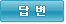
<style>
.page{position:relative;width:66px;height:24px}
.page>*{position:absolute;margin:0}
.t1{font:12px "morris9";color:#ffffff;font-weight:bold}
</style>
<div class="page">
<p class="t1" style="left:19px;top:6px;width:26px;height:10px">답 변</p>
</div>
